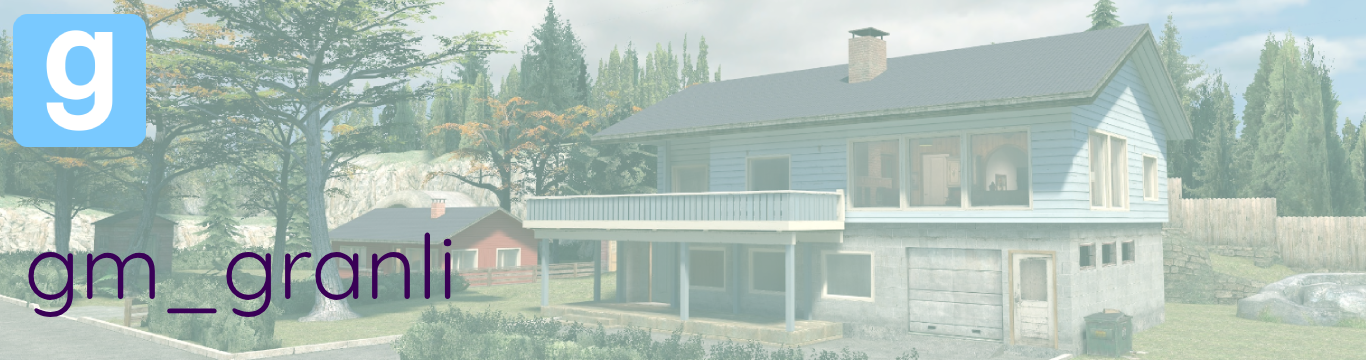
<style>
.page{position:relative;width:1366px;height:360px}
.page>*{position:absolute;margin:0}
.t1{font:89.7px "Quicksand-Regular";color:#390056}
</style>
<div class="page">
<p class="t1" style="left:28px;top:232px;width:424px;height:85px">gm_granli</p>
</div>
